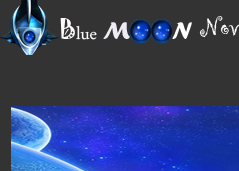
<style>
.page{position:relative;width:239px;height:171px;background:#333333}
.page>*{position:absolute;margin:0}
.t1{font:24.9px "DaunPenh";color:#fdfafa}
.t2{font:24.9px "Jokerman-Regular";color:#fdfafa}
.t3{font:24.9px "ForteMT";color:#eeebf4}
.t4{font:24.8px "ForteMT";color:#ffffff}
</style>
<div class="page">
<p class="t1" style="left:60px;top:18px;width:70px;height:22px"><span class="t2">B</span>lue <span class="t3">M</span></p>
<p class="t4" style="left:172px;top:22px;width:20px;height:17px">N</p>
</div>
